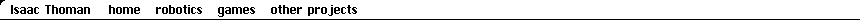
<style>
.page{position:relative;width:860px;height:20px;background:#ffffff}
.page>*{position:absolute;margin:0}
.t1{font:16px "ChiKareGo";color:#000000}
</style>
<div class="page">
<p class="t1" style="left:11px;top:5px;width:79px;height:9px">Isaac Thoman</p>
<p class="t1" style="left:109px;top:5px;width:248px;height:12px">home   robotics   games   other projects</p>
</div>
